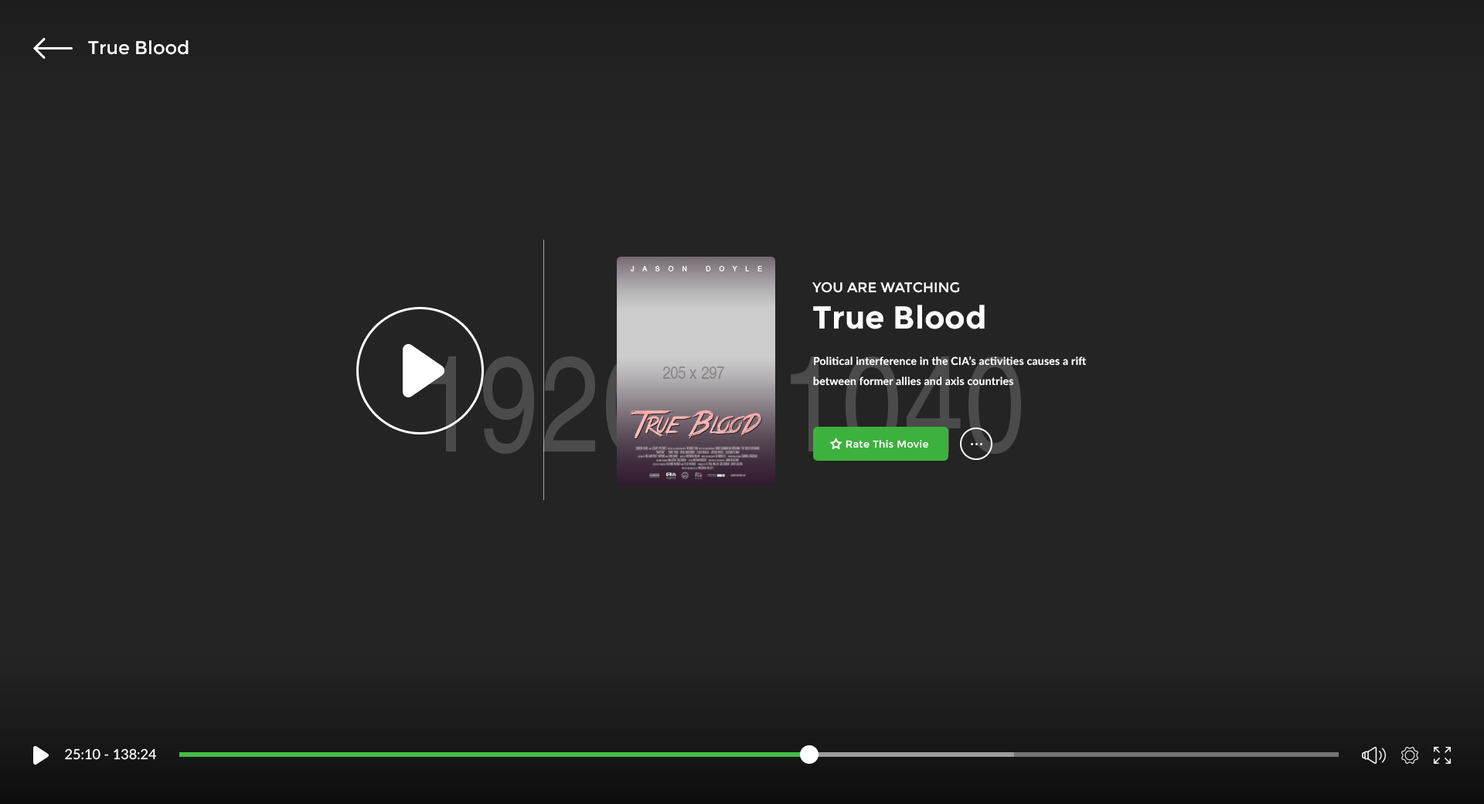
<style>
.page{position:relative;width:1484px;height:804px;background:#242424}
.page>*{position:absolute;margin:0}
.t1{font:18.5px "Montserrat-Regular";color:#ffffff}
.t2{font:7px "HelveticaLTStd-Roman";letter-spacing:1.2em;color:#ffffff}
.t3{font:13.9px "Montserrat-Regular";color:#ffffff;text-transform:uppercase}
.t4{font:31.7px "Montserrat-Bold";color:#ffffff}
.t5{font:10.8px/20.1px "Lato-Bold";letter-spacing:0.017em;color:#ffffff}
.t6{font:10px "Montserrat-Regular";letter-spacing:0.02em;color:#ffffff}
.t7{font:13.9px "Lato-Regular";color:#ffffff}
</style>
<div class="page">
<p class="t1" style="left:88px;top:40px;width:101px;height:15px">True Blood</p>
<p class="t2" style="left:631px;top:266px;width:131px;height:5px">JASON DOYLE</p>
<p class="t3" style="left:812px;top:281px;width:148px;height:12px">you are watching</p>
<p class="t4" style="left:813px;top:304px;width:172px;height:25px">True Blood</p>
<p class="t5" style="left:813px;top:356px;width:274px;height:30px">Political interference in the CIA’s activities causes a rift <br>between former allies and axis countries</p>
<p class="t6" style="left:845px;top:440px;width:84px;height:8px">Rate This Movie</p>
<p class="t7" style="left:65px;top:748px;width:91px;height:12px">25:10 - 138:24</p>
</div>
